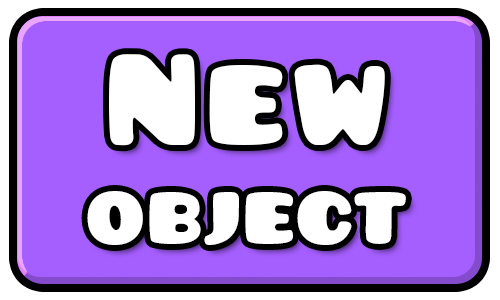
<style>
.page{position:relative;width:500px;height:300px;background:#a55eff}
.page>*{position:absolute;margin:0}
.t1{font:80px/100px "Pusab";letter-spacing:0.04em;color:#ffffff}
.t2{font:140px/94px "Pusab";letter-spacing:0.04em;color:#ffffff}
</style>
<div class="page">
<p class="t1" style="left:87px;top:54px;width:319px;height:191px;text-align:center"><span class="t2">New<br></span>OBJECT</p>
</div>
